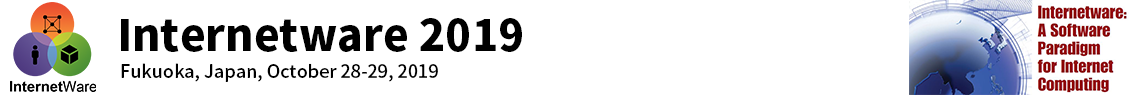
<style>
.page{position:relative;width:1140px;height:95px;background:#ffffff}
.page>*{position:absolute;margin:0}
.t1{font:43.1px "SourceHanSans-Heavy";color:#000000}
.t2{font:18px "SourceHanSans-Medium";color:#000000}
</style>
<div class="page">
<p class="t1" style="left:121px;top:18px;width:401px;height:34px">Internetware 2019</p>
<p class="t2" style="left:121px;top:63px;width:317px;height:19px">Fukuoka, Japan, October 28-29, 2019</p>
</div>
